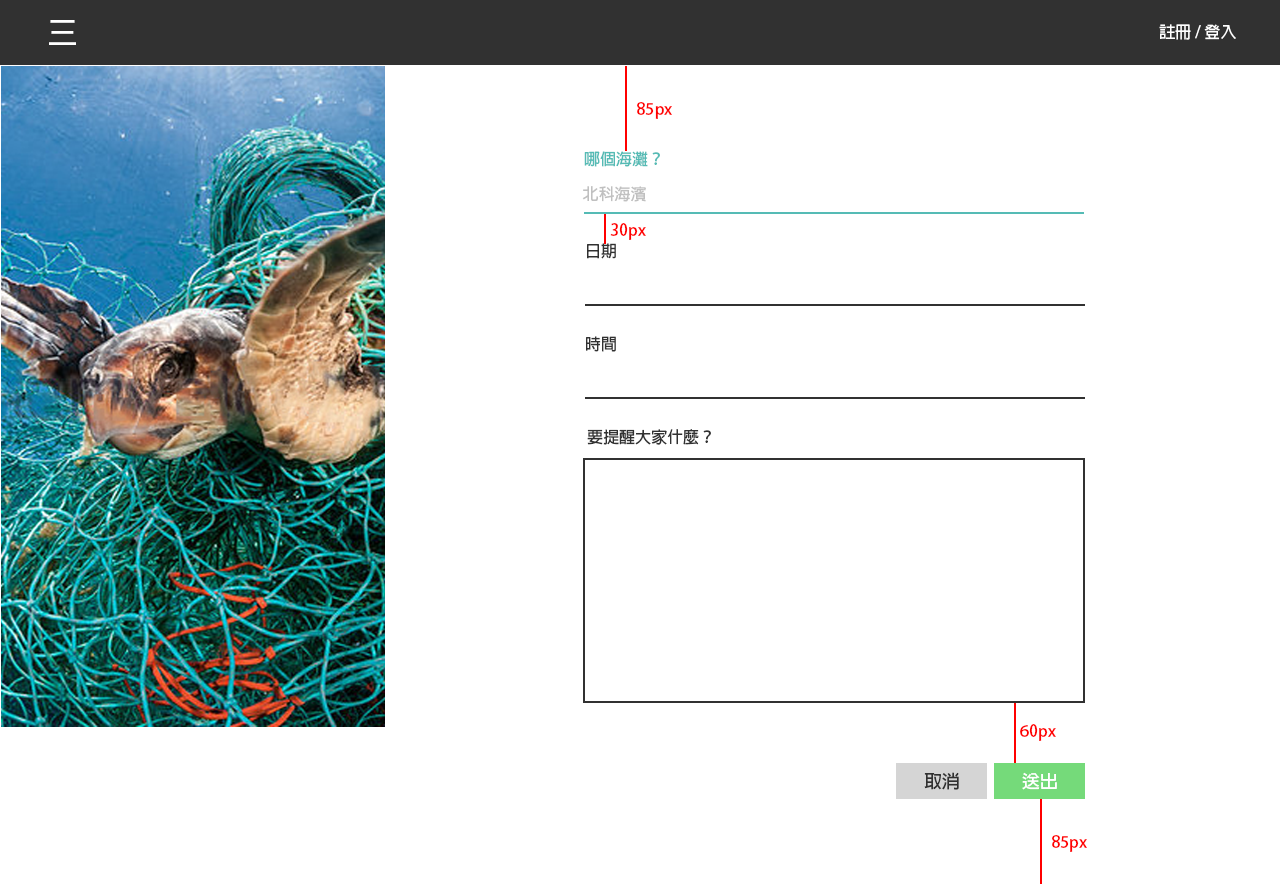
<style>
.page{position:relative;width:1280px;height:884px;background:#ffffff}
.page>*{position:absolute;margin:0}
.t1{font:30px "AdobeFanHeitiStd-Bold";color:#ffffff}
.t2{font:16px "AdobeFanHeitiStd-Bold";color:#ffffff}
.t3{font:16px "AdobeFanHeitiStd-Bold";color:#ff0000}
.t4{font:16px "AdobeFanHeitiStd-Bold";color:#55bbb5}
.t5{font:16px "AdobeFanHeitiStd-Bold";color:#c0c0c0}
.t6{font:16px "AdobeFanHeitiStd-Bold";color:#313131}
.t7{font:18px "AdobeFanHeitiStd-Bold";color:#313131}
.t8{font:18px "AdobeFanHeitiStd-Bold";color:#ffffff}
</style>
<div class="page">
<p class="t1" style="left:49px;top:20px;width:27px;height:25px">三</p>
<p class="t2" style="left:1159px;top:24px;width:77px;height:16px">註冊 / 登入</p>
<p class="t3" style="left:637px;top:102px;width:35px;height:17px">85px</p>
<p class="t4" style="left:584px;top:151px;width:76px;height:16px">哪個海灘？</p>
<p class="t5" style="left:582px;top:186px;width:64px;height:16px">北科海濱</p>
<p class="t3" style="left:610px;top:223px;width:36px;height:17px">30px</p>
<p class="t6" style="left:587px;top:243px;width:29px;height:16px">日期</p>
<p class="t6" style="left:586px;top:336px;width:30px;height:16px">時間</p>
<p class="t6" style="left:587px;top:429px;width:124px;height:16px">要提醒大家什麼？</p>
<p class="t3" style="left:1020px;top:724px;width:36px;height:17px">60px</p>
<p class="t7" style="left:924px;top:772px;width:35px;height:18px">取消</p>
<p class="t8" style="left:1022px;top:772px;width:35px;height:18px">送出</p>
<p class="t3" style="left:1052px;top:835px;width:35px;height:17px">85px</p>
</div>
